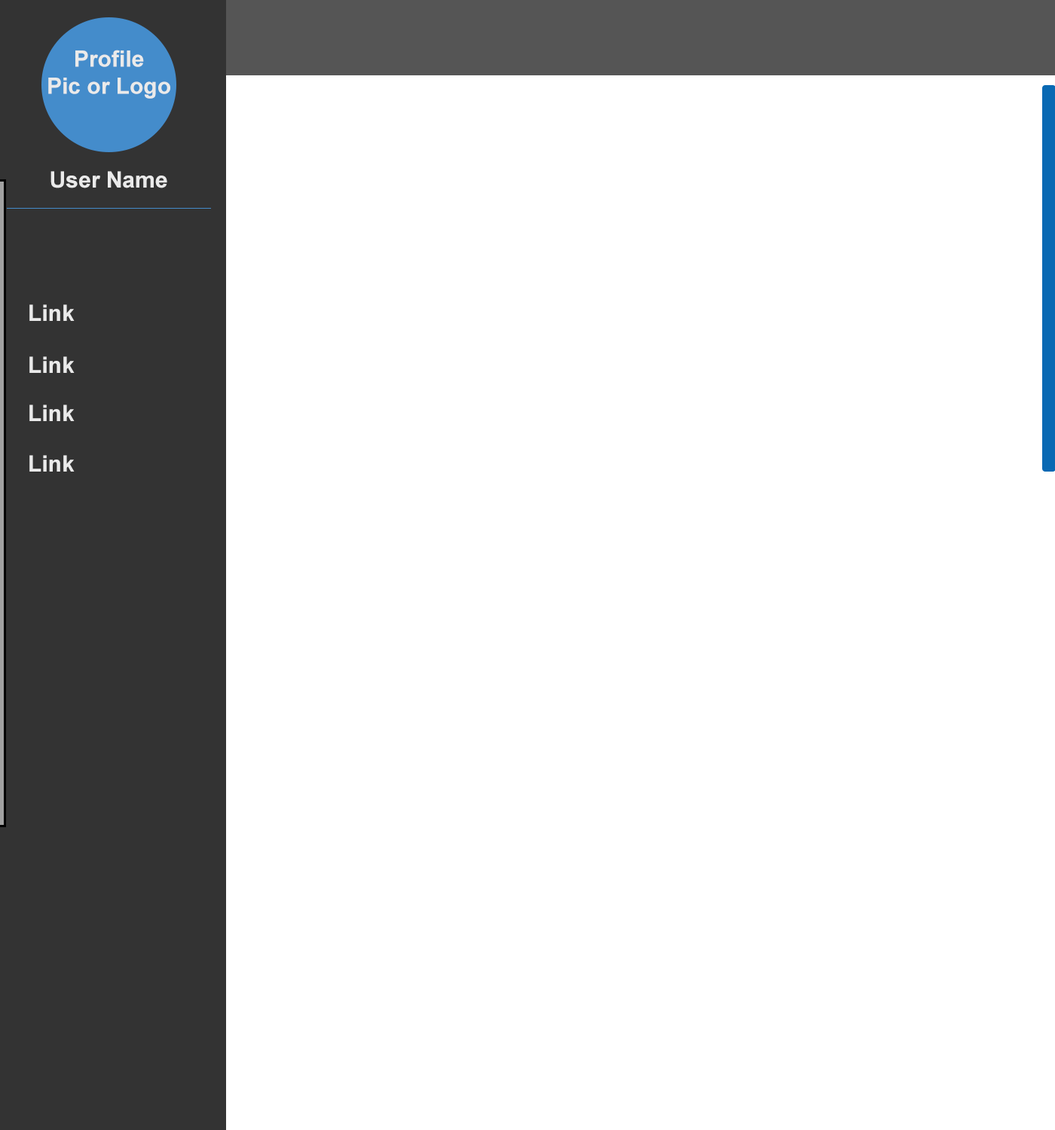
<style>
.page{position:relative;width:1055px;height:1130px;background:#ffffff}
.page>*{position:absolute;margin:0}
.t1{font:22.6px "Arial-BoldMT";color:#eaeaea}
</style>
<div class="page">
<p class="t1" style="left:50px;top:171px;width:117px;height:17px">User Name</p>
<p class="t1" style="left:29px;top:304px;width:46px;height:17px">Link</p>
<p class="t1" style="left:29px;top:356px;width:46px;height:17px">Link</p>
<p class="t1" style="left:29px;top:405px;width:46px;height:16px">Link</p>
<p class="t1" style="left:29px;top:455px;width:46px;height:17px">Link</p>
</div>
